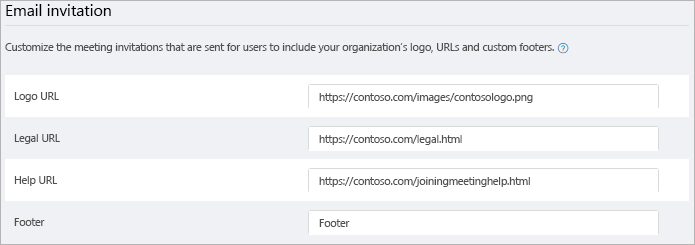
<style>
.page{position:relative;width:695px;height:245px;background:#f0f1f5}
.page>*{position:absolute;margin:0}
.t1{font:15.8px "SegoeUI";color:#000000}
.t2{font:10.5px "SegoeUI";color:#505050}
</style>
<div class="page">
<p class="t1" style="left:6px;top:4px;width:105px;height:12px">Email invitation</p>
<p class="t2" style="left:5px;top:43px;width:549px;height:10px">Customize the meeting invitations that are sent for users to include your organization’s logo, URLs and custom footers.</p>
<p class="t2" style="left:14px;top:92px;width:45px;height:10px">Logo URL</p>
<p class="t2" style="left:319px;top:93px;width:214px;height:10px">https://contoso.com/images/contosologo.png</p>
<p class="t2" style="left:14px;top:134px;width:46px;height:10px">Legal URL</p>
<p class="t2" style="left:319px;top:135px;width:143px;height:10px">https://contoso.com/legal.html</p>
<p class="t2" style="left:14px;top:176px;width:43px;height:10px">Help URL</p>
<p class="t2" style="left:319px;top:177px;width:211px;height:10px">https://contoso.com/joiningmeetinghelp.html</p>
<p class="t2" style="left:14px;top:218px;width:31px;height:8px">Footer</p>
<p class="t2" style="left:319px;top:219px;width:31px;height:8px">Footer</p>
</div>
